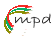
<style>
.page{position:relative;width:54px;height:40px;background:#ffffff}
.page>*{position:absolute;margin:0}
.t1{font:14px "BradleyHandITC";color:#272626;scale:1.5 1}
</style>
<div class="page">
<p class="t1" style="left:14px;top:12px;width:38px;height:17px">mpd</p>
</div>
